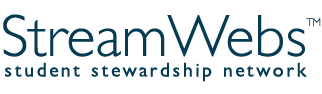
<style>
.page{position:relative;width:322px;height:94px;background:#ffffff}
.page>*{position:absolute;margin:0}
.t1{font:60px "GillSansMT-Light";color:#063b52}
.t2{font:11px "GillSansMT-Light";color:#063b52}
.t3{font:19.8px "GillSansMT";letter-spacing:0.125em;color:#063b52}
</style>
<div class="page">
<p class="t1" style="left:3px;top:14px;width:318px;height:43px">StreamWebs<span class="t2">TM</span></p>
<p class="t3" style="left:5px;top:62px;width:302px;height:20px">student stewardship network</p>
</div>
